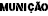
<style>
.page{position:relative;width:48px;height:16px;background:#ffffff}
.page>*{position:absolute;margin:0}
.t1{font:10.7px "PaulGroteskStencil-Black";color:#000000;text-transform:uppercase;font-weight:bold;scale:0.9 1}
</style>
<div class="page">
<p class="t1" style="left:0px;top:1px;width:49px;height:12px">MUNIÇÃO</p>
</div>
